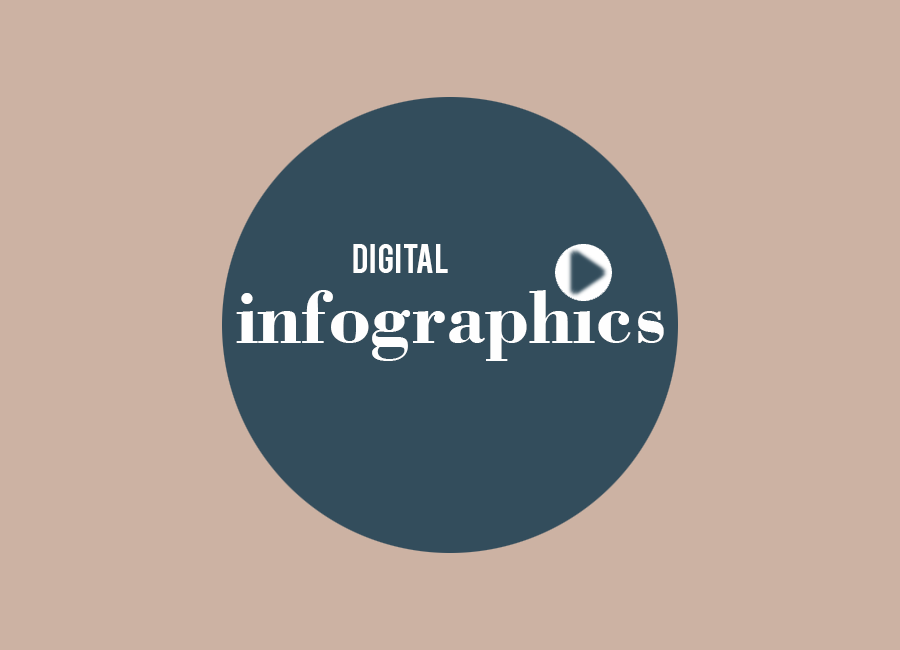
<style>
.page{position:relative;width:900px;height:650px;background:#ccb2a3}
.page>*{position:absolute;margin:0}
.t1{font:32px "Bebas";color:#fefefe}
.t2{font:80px "BodoniBT-Bold";color:#fefefe}
</style>
<div class="page">
<p class="t1" style="left:353px;top:244px;width:95px;height:29px">digital</p>
<p class="t2" style="left:236px;top:290px;width:428px;height:71px">infographics</p>
</div>
